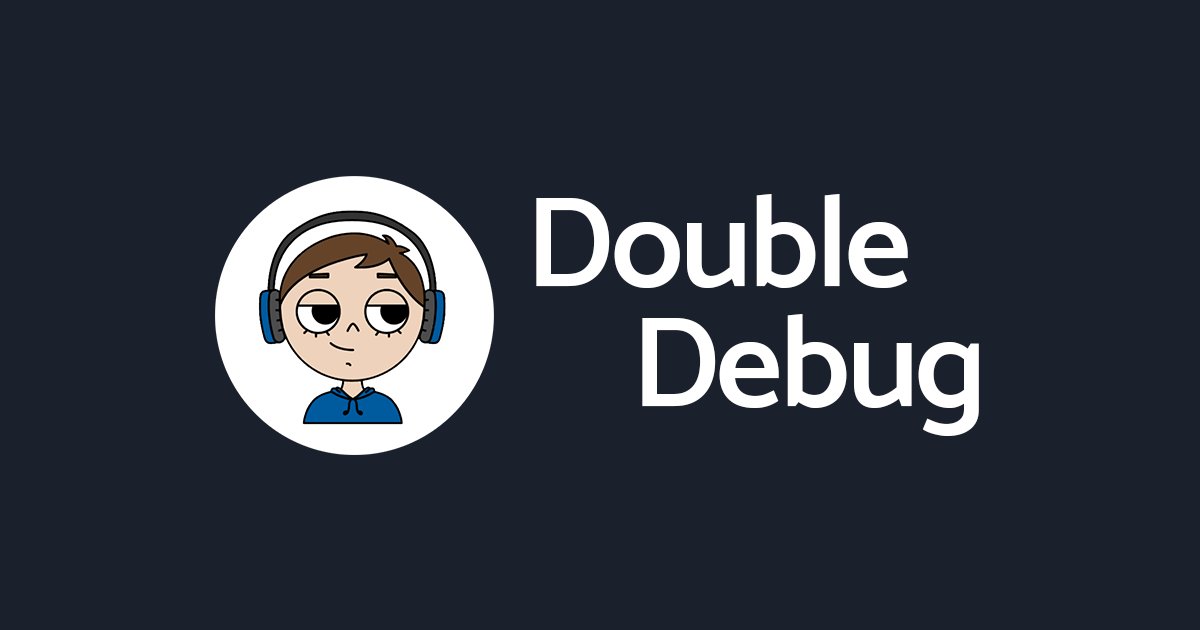
<style>
.page{position:relative;width:1200px;height:630px;background:#1a202c}
.page>*{position:absolute;margin:0}
.t1{font:130px/120px "MoskSemi-Bold600";letter-spacing:-0.025em;color:#ffffff}
</style>
<div class="page">
<p class="t1" style="left:536px;top:194px;width:443px;height:242px">Double<br>    Debug</p>
</div>
